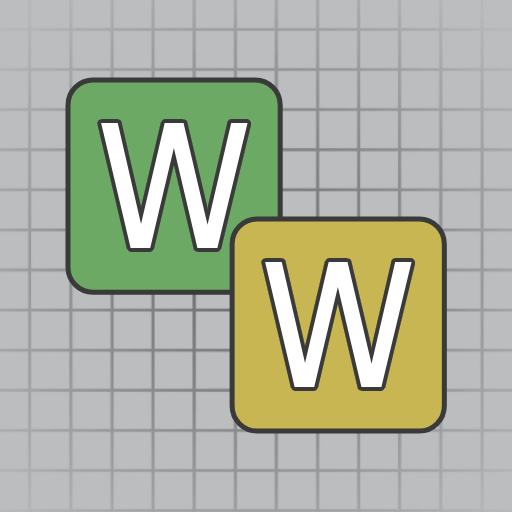
<style>
.page{position:relative;width:512px;height:512px;background:#bbbdbf}
.page>*{position:absolute;margin:0}
.t1{font:184.8px "ClearSans";color:#ffffff}
</style>
<div class="page">
<p class="t1" style="left:101px;top:123px;width:147px;height:125px">W</p>
<p class="t1" style="left:265px;top:262px;width:147px;height:125px">W</p>
</div>
